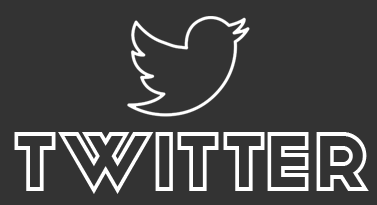
<style>
.page{position:relative;width:377px;height:205px;background:#333333}
.page>*{position:absolute;margin:0}
.t1{font:85px "Avalon-Regular";color:#ffffff}
</style>
<div class="page">
<p class="t1" style="left:14px;top:132px;width:355px;height:62px">twitter</p>
</div>
